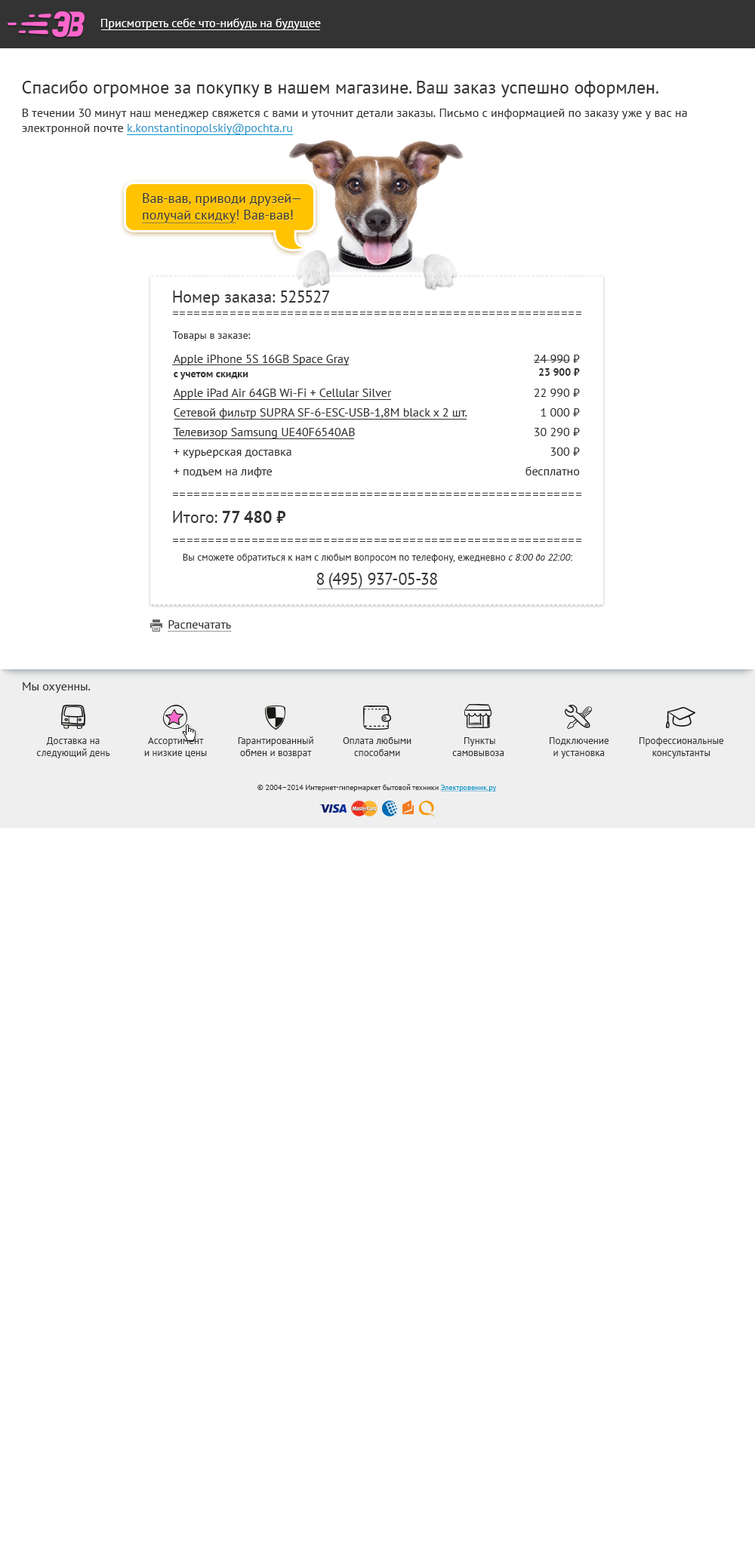
<style>
.page{position:relative;width:755px;height:1568px;background:#ffffff}
.page>*{position:absolute;margin:0}
.t1{font:12.1px "PTSans-Regular";color:#ffffff}
.t2{font:18.1px "PTSans-Regular";color:#333333}
.t3{font:12.1px/15.1px "PTSans-Regular";color:#333333}
.t4{font:12.1px/15.1px "PTSans-Regular";color:#3399cc}
.t5{font:13.6px/16.6px "PTSans-Regular";color:#333333}
.t6{font:16.6px "PTSans-Regular";color:#333333}
.t7{font:13.6px "PTSans-Regular";color:#333333}
.t8{font:10.6px "PTSans-Regular";color:#333333}
.t9{font:12.1px "PTSans-Regular";color:#333333}
.t10{font:10.6px "PTSans-Bold";color:#333333}
.t11{font:16.6px "PTSans-Bold";color:#333333}
.t12{font:9.9px "PTSans-Regular";color:#333333}
.t13{font:9.9px "PTSans-Italic";color:#333333}
.t14{font:16.7px "PTSans-Regular";color:#333333}
.t15{font:9.8px/12.1px "PTSans-Regular";color:#333333}
.t16{font:7.5px "PTSans-Regular";color:#333333}
.t17{font:7.5px "PTSans-Regular";color:#0099cc;text-decoration:underline}
</style>
<div class="page">
<p class="t1" style="left:101px;top:18px;width:220px;height:11px">Присмотреть себе что-нибудь на будущее</p>
<p class="t2" style="left:22px;top:80px;width:637px;height:17px">Спасибо огромное за покупку в нашем магазине. Ваш заказ успешно оформлен.</p>
<p class="t3" style="left:22px;top:109px;width:665px;height:25px">В течении 30 минут наш менеджер свяжется с вами и уточнит детали заказы. Письмо с информацией по заказу уже у вас на<br>электронной почте <span class="t4">k.konstantinopolskiy@pochta.ru</span></p>
<p class="t5" style="left:143px;top:193px;width:158px;height:30px">Вав-вав, приводи друзей—<br>получай скидку! Вав-вав!</p>
<p class="t6" style="left:173px;top:291px;width:157px;height:15px">Номер заказа: 525527</p>
<p class="t7" style="left:173px;top:312px;width:408px;height:3px">=========================================================</p>
<p class="t8" style="left:172px;top:331px;width:79px;height:10px">Товары в заказе:</p>
<p class="t9" style="left:173px;top:355px;width:176px;height:10px">Apple iPhone 5S 16GB Space Gray</p>
<p class="t9" style="left:533px;top:355px;width:47px;height:8px">24 990 ⃏</p>
<p class="t10" style="left:174px;top:372px;width:74px;height:8px">с учетом скидки</p>
<p class="t10" style="left:538px;top:368px;width:42px;height:8px">23 900 ⃏</p>
<p class="t9" style="left:173px;top:389px;width:219px;height:10px">Apple iPad Air 64GB Wi-Fi + Cellular Silver</p>
<p class="t9" style="left:533px;top:389px;width:47px;height:8px">22 990 ⃏</p>
<p class="t9" style="left:174px;top:408px;width:293px;height:11px">Сетевой фильтр SUPRA SF-6-ESC-USB-1,8M black x 2 шт.</p>
<p class="t9" style="left:540px;top:408px;width:40px;height:9px">1 000 ⃏</p>
<p class="t9" style="left:173px;top:428px;width:182px;height:10px">Телевизор Samsung UE40F6540AB</p>
<p class="t9" style="left:534px;top:428px;width:46px;height:8px">30 290 ⃏</p>
<p class="t9" style="left:174px;top:449px;width:117px;height:9px">+ курьерская доставка</p>
<p class="t9" style="left:550px;top:447px;width:30px;height:9px">300 ⃏</p>
<p class="t9" style="left:174px;top:467px;width:98px;height:11px">+ подъем на лифте</p>
<p class="t9" style="left:525px;top:466px;width:55px;height:9px">бесплатно</p>
<p class="t7" style="left:173px;top:493px;width:408px;height:3px">=========================================================</p>
<p class="t11" style="left:173px;top:511px;width:113px;height:12px"><span class="t6">Итого: </span>77 480 ⃏</p>
<p class="t7" style="left:173px;top:539px;width:408px;height:3px">=========================================================</p>
<p class="t12" style="left:183px;top:554px;width:390px;height:9px">Вы сможете обратиться к нам с любым вопросом по телефону, ежедневно <span class="t13">с 8:00 до 22:00</span>:</p>
<p class="t14" style="left:316px;top:573px;width:121px;height:16px">8 (495) 937-05-38</p>
<p class="t9" style="left:168px;top:620px;width:63px;height:9px">Распечатать</p>
<p class="t9" style="left:23px;top:682px;width:68px;height:11px">Мы охуенны.</p>
<p class="t15" style="left:37px;top:737px;width:73px;height:21px;text-align:center">Доставка на<br>следующий день</p>
<p class="t15" style="left:144px;top:737px;width:63px;height:21px;text-align:center">Ассортимент<br>и низкие цены</p>
<p class="t15" style="left:238px;top:736px;width:75px;height:22px;text-align:center">Гарантированный<br>обмен и возврат</p>
<p class="t15" style="left:343px;top:737px;width:68px;height:19px;text-align:center">Оплата любыми<br>способами</p>
<p class="t15" style="left:452px;top:737px;width:52px;height:19px;text-align:center">Пункты<br>самовывоза</p>
<p class="t15" style="left:549px;top:737px;width:60px;height:21px;text-align:center">Подключение<br>и установка</p>
<p class="t15" style="left:639px;top:737px;width:85px;height:21px;text-align:center">Профессиональные<br>консультанты</p>
<p class="t16" style="left:257px;top:784px;width:240px;height:8px">© 2004–2014 Интернет-гипермаркет бытовой техники <span class="t17">Электровеник.ру</span></p>
</div>
